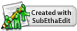
<style>
.page{position:relative;width:77px;height:31px;background:#ffffff}
.page>*{position:absolute;margin:0}
.t1{font:7.1px "Myriad-Bold";color:#292929}
</style>
<div class="page">
<p class="t1" style="left:31px;top:9px;width:40px;height:14px;text-align:center">Created with<br>SubEthaEdit</p>
</div>
